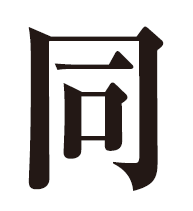
<style>
.page{position:relative;width:193px;height:211px;background:#ffffff}
.page>*{position:absolute;margin:0}
.t1{font:180.5px "RyuminPro-ExBold";letter-spacing:-0.1em;color:#231815;scale:0.88 1}
</style>
<div class="page">
<p class="t1" style="left:28px;top:26px;width:136px;height:165px">同</p>
</div>
